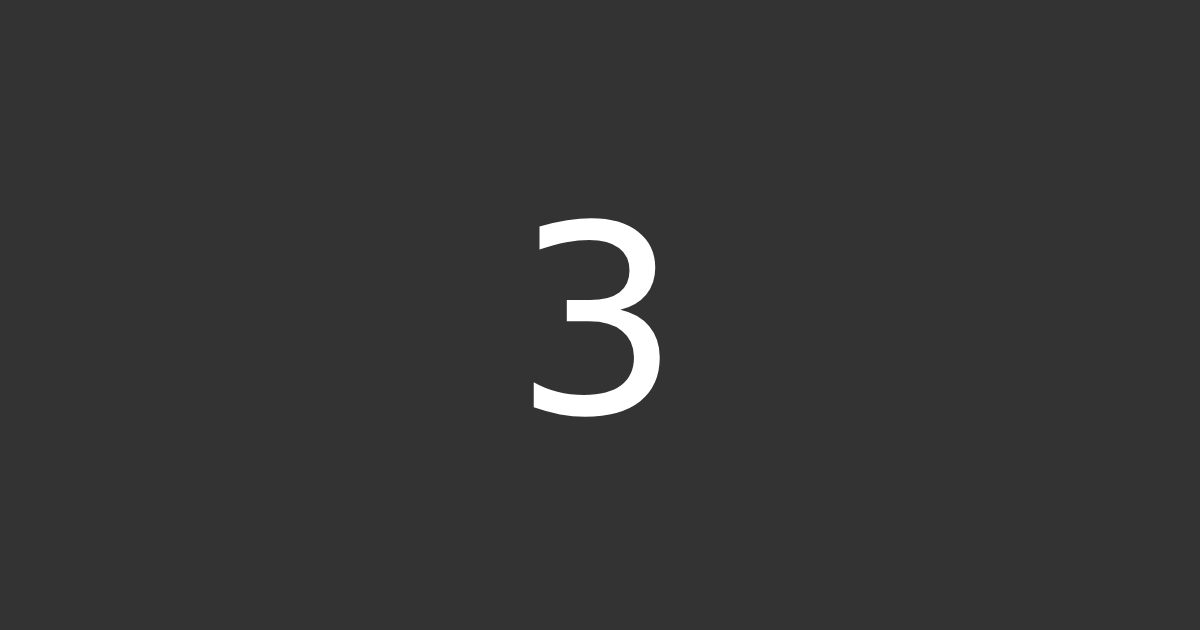
<style>
.page{position:relative;width:1200px;height:630px;background:#333333}
.page>*{position:absolute;margin:0}
.t1{font:262.5px "DejaVuSans";color:#ffffff}
</style>
<div class="page">
<p class="t1" style="left:533px;top:218px;width:127px;height:199px">3</p>
</div>
